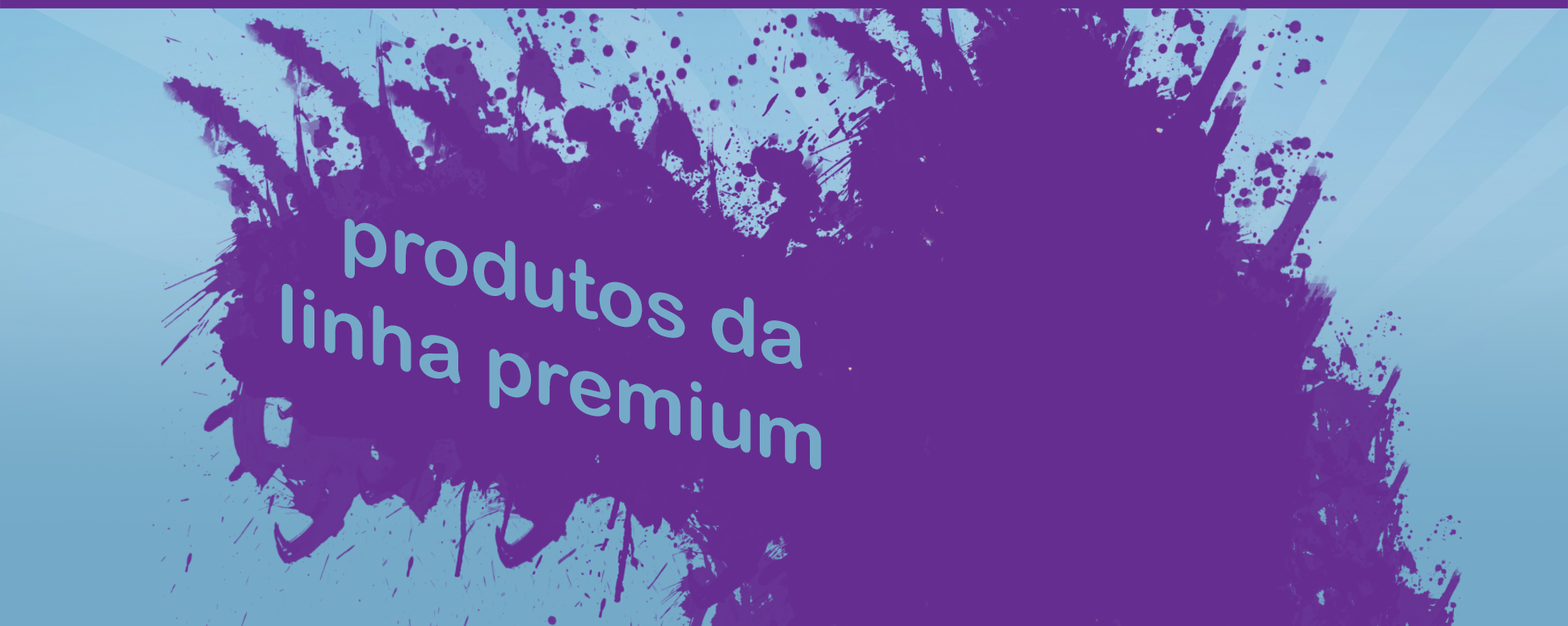
<style>
.page{position:relative;width:1568px;height:626px;background:#662d91}
.page>*{position:absolute;margin:0}
.t1{font:80px "ArialRoundedMTBold";color:#74aac8}
</style>
<div class="page">
<p class="t1" style="left:281px;top:218px;width:540px;height:252px;text-align:right;rotate:13deg">produtos da <br>linha premium</p>
</div>
